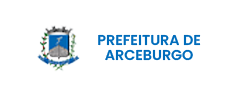
<style>
.page{position:relative;width:240px;height:96px;background:#ffffff}
.page>*{position:absolute;margin:0}
.t1{font:14.3px/14.7px "Poppins-SemiBold";color:#006cbb}
</style>
<div class="page">
<p class="t1" style="left:98px;top:34px;width:103px;height:27px;text-align:center">PREFEITURA DE<br>ARCEBURGO</p>
</div>
